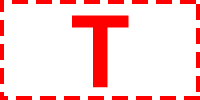
<style>
.page{position:relative;width:200px;height:100px;background:#ffffff}
.page>*{position:absolute;margin:0}
.t1{font:100px "Arial-BoldMT";color:#ff0000}
</style>
<div class="page">
<p class="t1" style="left:72px;top:15px;width:57px;height:73px">T</p>
</div>
